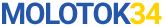
<style>
.page{position:relative;width:165px;height:27px;background:#ffffff}
.page>*{position:absolute;margin:0}
.t1{font:30px "Roboto-Bold";letter-spacing:-0.05em;color:#2457aa}
.t2{font:30px "Roboto-Bold";letter-spacing:-0.05em;color:#ffd200}
</style>
<div class="page">
<p class="t1" style="left:2px;top:2px;width:160px;height:23px">MOLOTOK<span class="t2">34</span></p>
</div>
